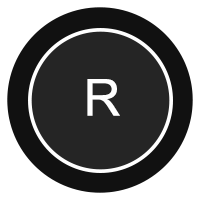
<style>
.page{position:relative;width:200px;height:200px;background:#ffffff}
.page>*{position:absolute;margin:0}
.t1{font:51.1px "ArialMT";color:#ffffff}
</style>
<div class="page">
<p class="t1" style="left:87px;top:79px;width:33px;height:37px">R</p>
</div>
